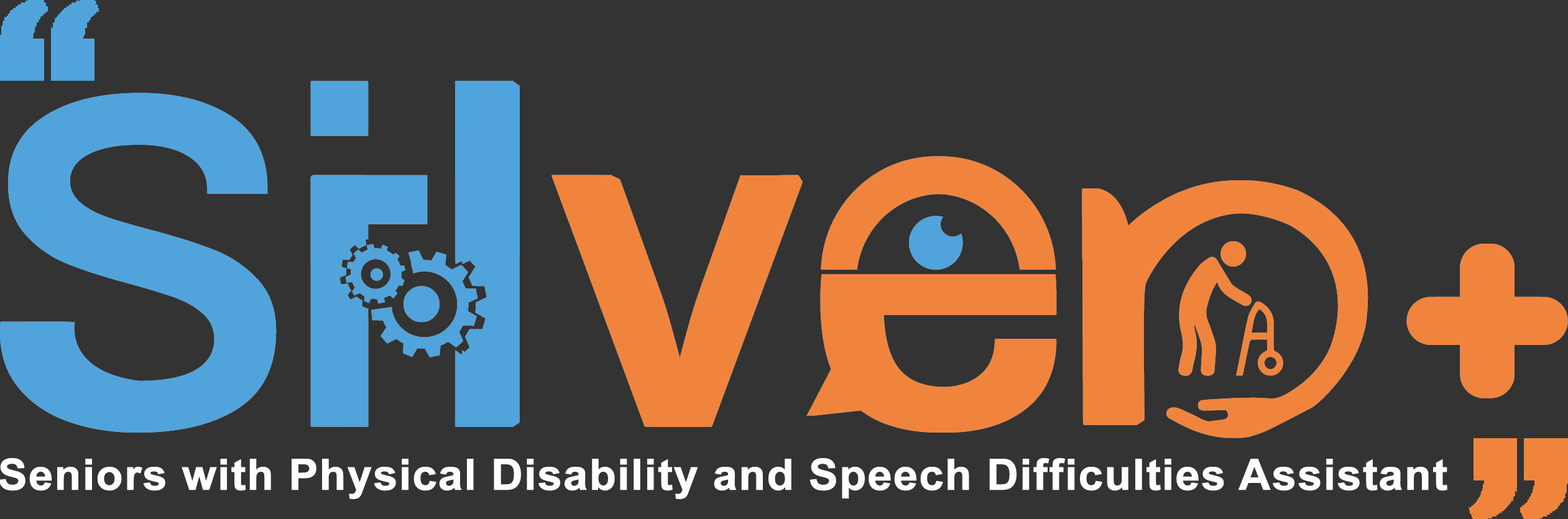
<style>
.page{position:relative;width:1568px;height:519px;background:#333333}
.page>*{position:absolute;margin:0}
.t1{font:42.9px "Arial-BoldMT";color:#fefefe;font-weight:bold;scale:1.03 1}
</style>
<div class="page">
<p class="t1" style="left:0px;top:458px;width:1447px;height:41px">Seniors with Physical Disability and Speech Difficulties Assistant</p>
</div>
